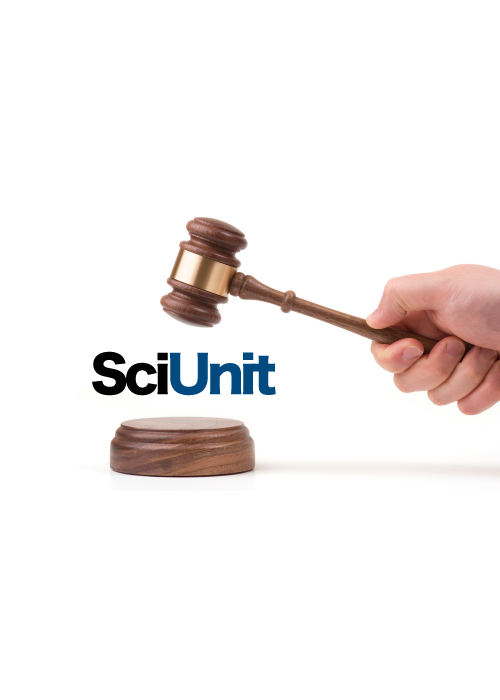
<style>
.page{position:relative;width:500px;height:700px;background:#ffffff}
.page>*{position:absolute;margin:0}
.t1{font:50px "HiraKakuStd-W8";letter-spacing:-0.075em;color:#000000}
.t2{font:50px "HiraKakuStd-W8";letter-spacing:-0.075em;color:#004a80}
.t3{font:50.2px "HiraKakuStd-W8";letter-spacing:-0.075em;color:#004a80}
</style>
<div class="page">
<p class="t1" style="left:92px;top:351px;width:184px;height:45px">Sci<span class="t2">Un</span><span class="t3">i</span><span class="t2">t</span></p>
</div>
